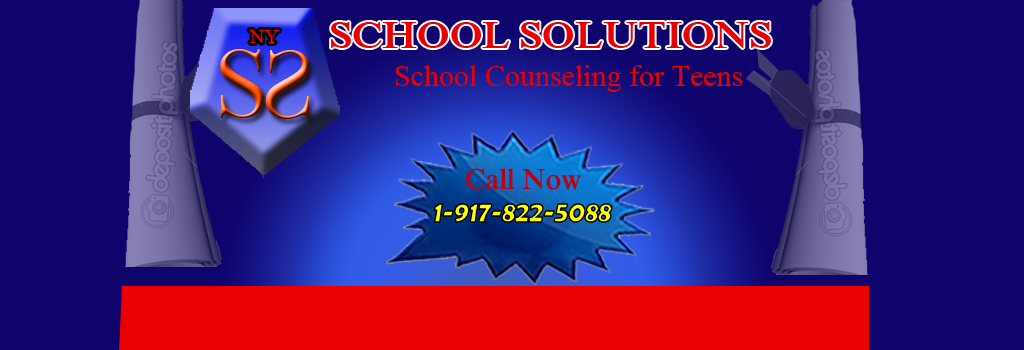
<style>
.page{position:relative;width:1024px;height:350px;background:#0f036c}
.page>*{position:absolute;margin:0}
.t1{font:40px "IskoolaPota-Bold";color:#ea0000}
.t2{font:30px "IskoolaPota";color:#ea0000}
.t3{font:30.2px/33.4px "BerlinSansFBDemi-Bold";font-style:italic;scale:0.89 1}
.t4{font:30.2px "IskoolaPota-Bold";scale:0.89 1}
</style>
<div class="page">
<p class="t1" style="left:331px;top:22px;width:440px;height:26px">SCHOOL SOLUTIONS</p>
<p class="t2" style="left:395px;top:65px;width:348px;height:27px">School Counseling for Teens</p>
<p class="t3" style="left:434px;top:168px;width:179px;height:55px;text-align:center"><span class="t4">Call Now <br></span>  1-917-822-5088</p>
</div>
